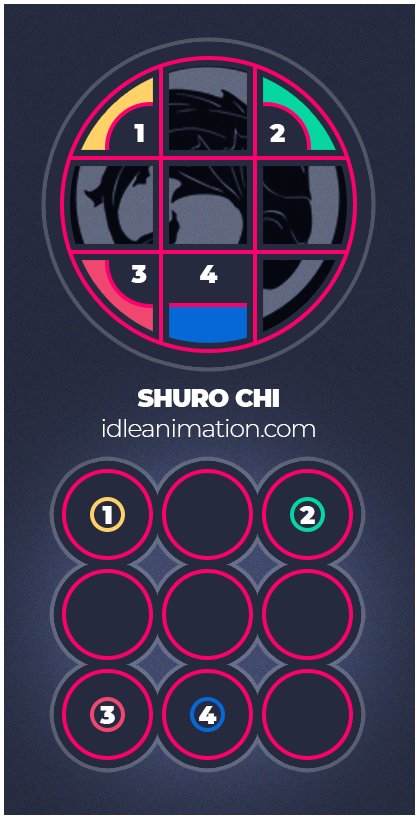
<style>
.page{position:relative;width:419px;height:819px;background:#252a3e}
.page>*{position:absolute;margin:0}
.t1{font:25px "Montserrat-Black";letter-spacing:-0.04em;color:#ffffff}
.t2{font:25px "Montserrat-Light";letter-spacing:-0.04em;color:#ffffff}
.t3{font:25px "Montserrat-Black";letter-spacing:0.2em;color:#ffffff}
</style>
<div class="page">
<p class="t1" style="left:134px;top:124px;width:10px;height:18px">1</p>
<p class="t1" style="left:269px;top:124px;width:16px;height:18px">2</p>
<p class="t1" style="left:131px;top:265px;width:16px;height:18px">3</p>
<p class="t1" style="left:200px;top:265px;width:18px;height:18px">4</p>
<p class="t2" style="left:102px;top:389px;width:213px;height:48px;text-align:center"><span class="t1">SHURO CHI<br></span>idleanimation.com</p>
<p class="t3" style="left:102px;top:506px;width:10px;height:18px">1</p>
<p class="t3" style="left:299px;top:506px;width:16px;height:18px">2</p>
<p class="t3" style="left:99px;top:706px;width:16px;height:18px">3</p>
<p class="t3" style="left:199px;top:706px;width:18px;height:18px">4</p>
</div>
